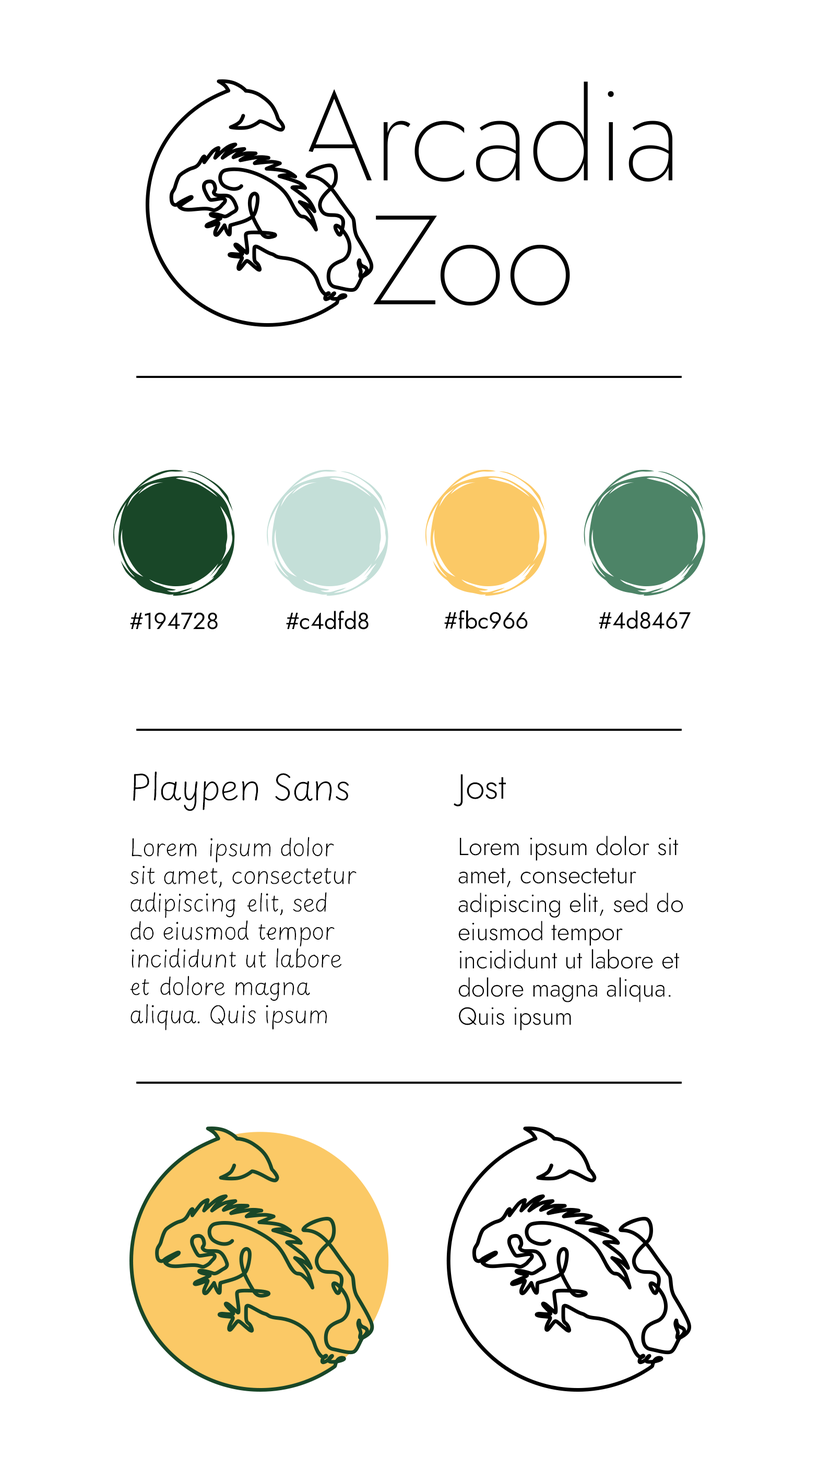
<style>
.page{position:relative;width:818px;height:1458px;background:#ffffff}
.page>*{position:absolute;margin:0}
.t1{font:23.2px "Jost-Regular";color:#000000}
.t2{font:23.2px "PlaypenSans-ExtraLight";color:#000000}
.t3{font:34.8px "PlaypenSans-ExtraLight";color:#000000}
.t4{font:24.6px/28.3px "JostRoman-Light";color:#000000}
.t5{font:34.8px/28.3px "JostRoman-Light";color:#000000}
.t6{font:23.2px/28.3px "JostRoman-Light";color:#000000}
</style>
<div class="page">
<p class="t1" style="left:130px;top:612px;width:88px;height:17px">#194728</p>
<p class="t1" style="left:286px;top:610px;width:83px;height:19px">#c4dfd8</p>
<p class="t1" style="left:444px;top:610px;width:84px;height:19px">#fbc966</p>
<p class="t1" style="left:599px;top:610px;width:92px;height:19px">#4d8467</p>
<p class="t2" style="left:130px;top:771px;width:227px;height:259px"><span class="t3">Playpen Sans<br></span><br>Lorem ipsum dolor sit amet, consectetur adipiscing elit, sed do eiusmod tempor incididunt ut labore et dolore magna aliqua. Quis ipsum suspendisse ultrices gravida. Risus commodo viverra maecenas accumsan lacus vel facilisis.</p>
<p class="t4" style="left:454px;top:774px;width:229px;height:256px"><span class="t5">Jost<br><br></span>Lorem ipsum dolor sit amet, consectetur adipiscing elit, sed do eiusmod tempor incididunt ut labore et dolore magna aliqua. Quis ipsum <span class="t6">suspendisse ultrices gravida. Risus commodo viverra maecenas accumsan lacus vel facilisis.</span></p>
</div>
